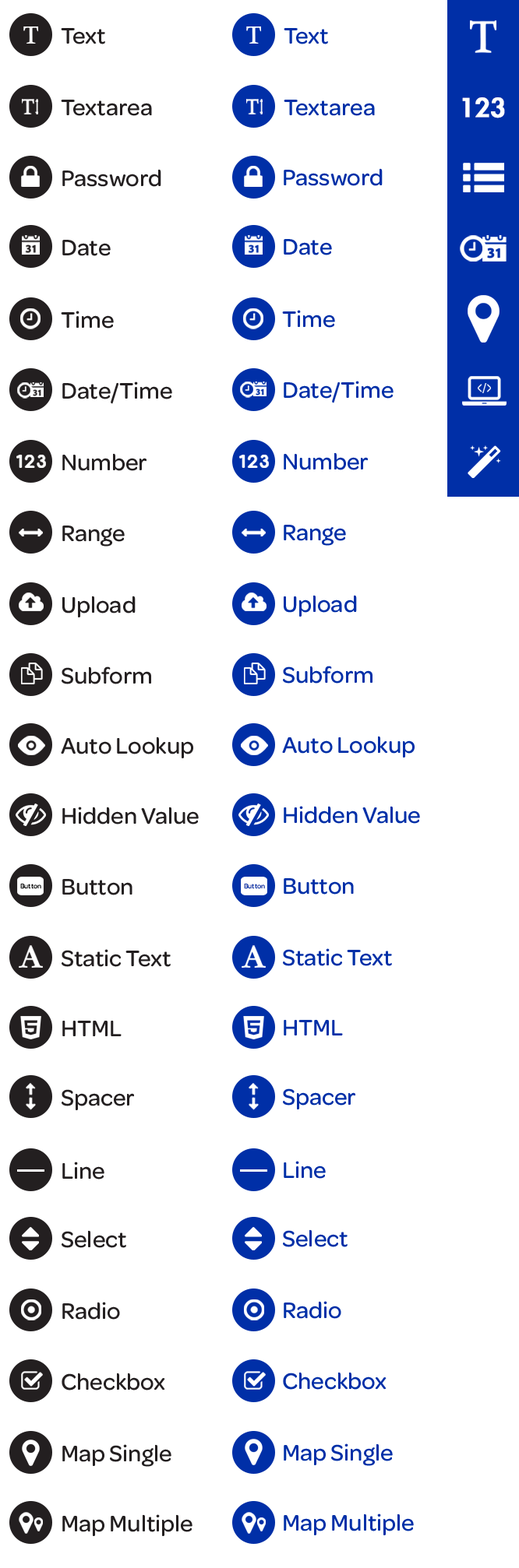
<style>
.page{position:relative;width:519px;height:1568px;background:#ffffff}
.page>*{position:absolute;margin:0}
.t1{font:24px "Omnes-Medium";color:#231f20}
.t2{font:24px "Omnes-Medium";color:#002fa7}
.t3{font:31.1px "LiGothicMed";color:#ffffff;font-weight:bold}
.t4{font:7.1px "Omnes-Medium";color:#000000}
.t5{font:7.1px "Omnes-Medium";color:#002fa7}
</style>
<div class="page">
<p class="t1" style="left:61px;top:28px;width:44px;height:16px">Text</p>
<p class="t2" style="left:283px;top:28px;width:45px;height:16px">Text</p>
<p class="t1" style="left:61px;top:100px;width:91px;height:16px">Textarea</p>
<p class="t2" style="left:283px;top:100px;width:91px;height:16px">Textarea</p>
<p class="t3" style="left:462px;top:97px;width:43px;height:21px">123</p>
<p class="t1" style="left:62px;top:169px;width:99px;height:18px">Password</p>
<p class="t2" style="left:283px;top:168px;width:99px;height:18px">Password</p>
<p class="t1" style="left:62px;top:240px;width:49px;height:16px">Date</p>
<p class="t2" style="left:283px;top:239px;width:49px;height:16px">Date</p>
<p class="t1" style="left:61px;top:311px;width:53px;height:18px">Time</p>
<p class="t2" style="left:282px;top:310px;width:53px;height:18px">Time</p>
<p class="t1" style="left:62px;top:381px;width:110px;height:23px">Date/Time</p>
<p class="t2" style="left:283px;top:381px;width:110px;height:22px">Date/Time</p>
<p class="t1" style="left:62px;top:453px;width:84px;height:18px">Number</p>
<p class="t2" style="left:283px;top:452px;width:84px;height:18px">Number</p>
<p class="t1" style="left:62px;top:526px;width:63px;height:21px">Range</p>
<p class="t2" style="left:283px;top:525px;width:63px;height:21px">Range</p>
<p class="t1" style="left:62px;top:596px;width:73px;height:21px">Upload</p>
<p class="t2" style="left:283px;top:595px;width:74px;height:22px">Upload</p>
<p class="t2" style="left:283px;top:666px;width:89px;height:18px">Subform</p>
<p class="t1" style="left:62px;top:666px;width:89px;height:18px">Subform</p>
<p class="t1" style="left:61px;top:737px;width:132px;height:21px">Auto Lookup</p>
<p class="t2" style="left:282px;top:736px;width:132px;height:22px">Auto Lookup</p>
<p class="t1" style="left:62px;top:807px;width:137px;height:17px">Hidden Value</p>
<p class="t2" style="left:283px;top:806px;width:137px;height:18px">Hidden Value</p>
<p class="t1" style="left:62px;top:879px;width:70px;height:16px">Button</p>
<p class="t2" style="left:283px;top:878px;width:70px;height:17px">Button</p>
<p class="t4" style="left:20px;top:884px;width:21px;height:5px">Button</p>
<p class="t5" style="left:244px;top:884px;width:21px;height:5px">Button</p>
<p class="t1" style="left:62px;top:949px;width:109px;height:18px">Static Text</p>
<p class="t2" style="left:283px;top:948px;width:109px;height:18px">Static Text</p>
<p class="t1" style="left:62px;top:1021px;width:59px;height:15px">HTML</p>
<p class="t2" style="left:283px;top:1020px;width:60px;height:15px">HTML</p>
<p class="t1" style="left:62px;top:1089px;width:72px;height:21px">Spacer</p>
<p class="t2" style="left:283px;top:1088px;width:72px;height:21px">Spacer</p>
<p class="t1" style="left:62px;top:1162px;width:42px;height:18px">Line</p>
<p class="t2" style="left:283px;top:1161px;width:42px;height:18px">Line</p>
<p class="t2" style="left:283px;top:1229px;width:64px;height:18px">Select</p>
<p class="t1" style="left:62px;top:1230px;width:64px;height:18px">Select</p>
<p class="t1" style="left:62px;top:1302px;width:58px;height:18px">Radio</p>
<p class="t2" style="left:283px;top:1301px;width:58px;height:18px">Radio</p>
<p class="t1" style="left:62px;top:1373px;width:103px;height:17px">Checkbox</p>
<p class="t2" style="left:283px;top:1372px;width:103px;height:18px">Checkbox</p>
<p class="t1" style="left:62px;top:1444px;width:109px;height:23px">Map Single</p>
<p class="t2" style="left:283px;top:1443px;width:109px;height:23px">Map Single</p>
<p class="t1" style="left:62px;top:1514px;width:130px;height:22px">Map Multiple</p>
<p class="t2" style="left:283px;top:1514px;width:130px;height:21px">Map Multiple</p>
</div>
